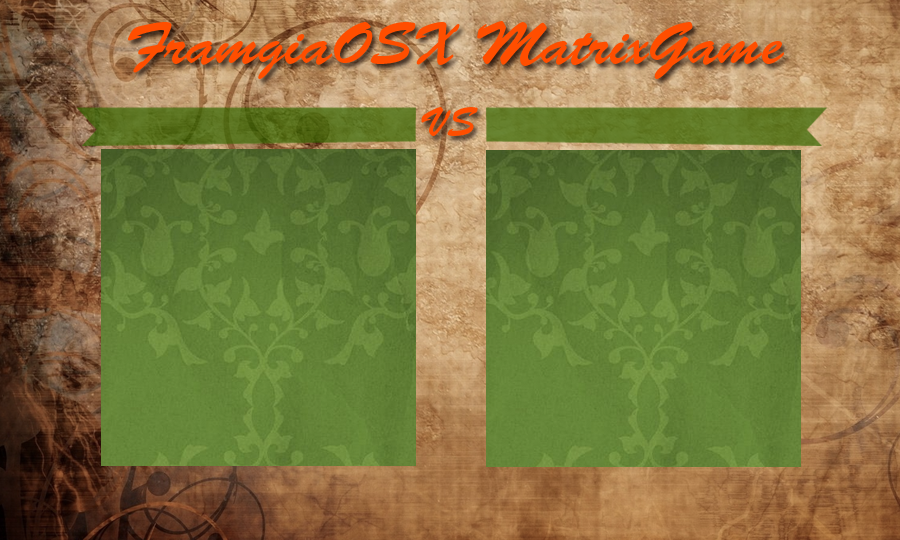
<style>
.page{position:relative;width:900px;height:540px}
.page>*{position:absolute;margin:0}
.t1{font:60px "BrushScriptStd";color:#ff4e00}
.t2{font:40px "BrushScriptStd";color:#ff4e00}
</style>
<div class="page">
<p class="t1" style="left:128px;top:21px;width:657px;height:58px">FramgiaOSX MatrixGame</p>
<p class="t2" style="left:421px;top:107px;width:57px;height:29px">VS</p>
</div>
